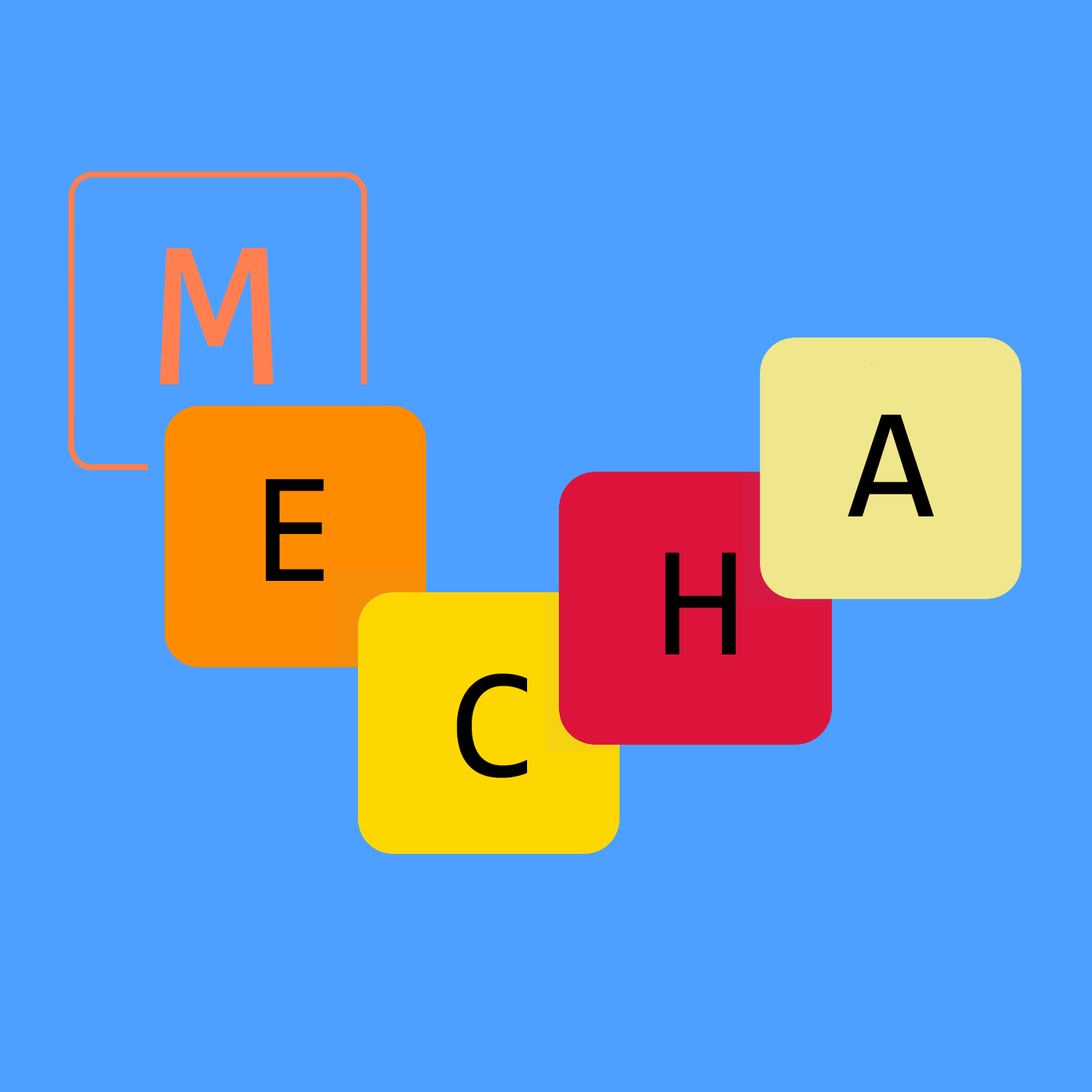
<style>
.page{position:relative;width:1092px;height:1092px;background:#4da0ff}
.page>*{position:absolute;margin:0}
.t1{font:227.5px "Consolas";letter-spacing:-0.025em;color:#ff7f50}
.t2{font:159.2px "Consolas";letter-spacing:-0.025em;color:#010000}
</style>
<div class="page">
<p class="t1" style="left:159px;top:248px;width:115px;height:146px">M</p>
<p class="t2" style="left:848px;top:414px;width:86px;height:102px">A</p>
<p class="t2" style="left:265px;top:479px;width:59px;height:102px">E</p>
<p class="t2" style="left:665px;top:552px;width:71px;height:102px">H</p>
<p class="t2" style="left:457px;top:673px;width:71px;height:105px">C</p>
</div>
